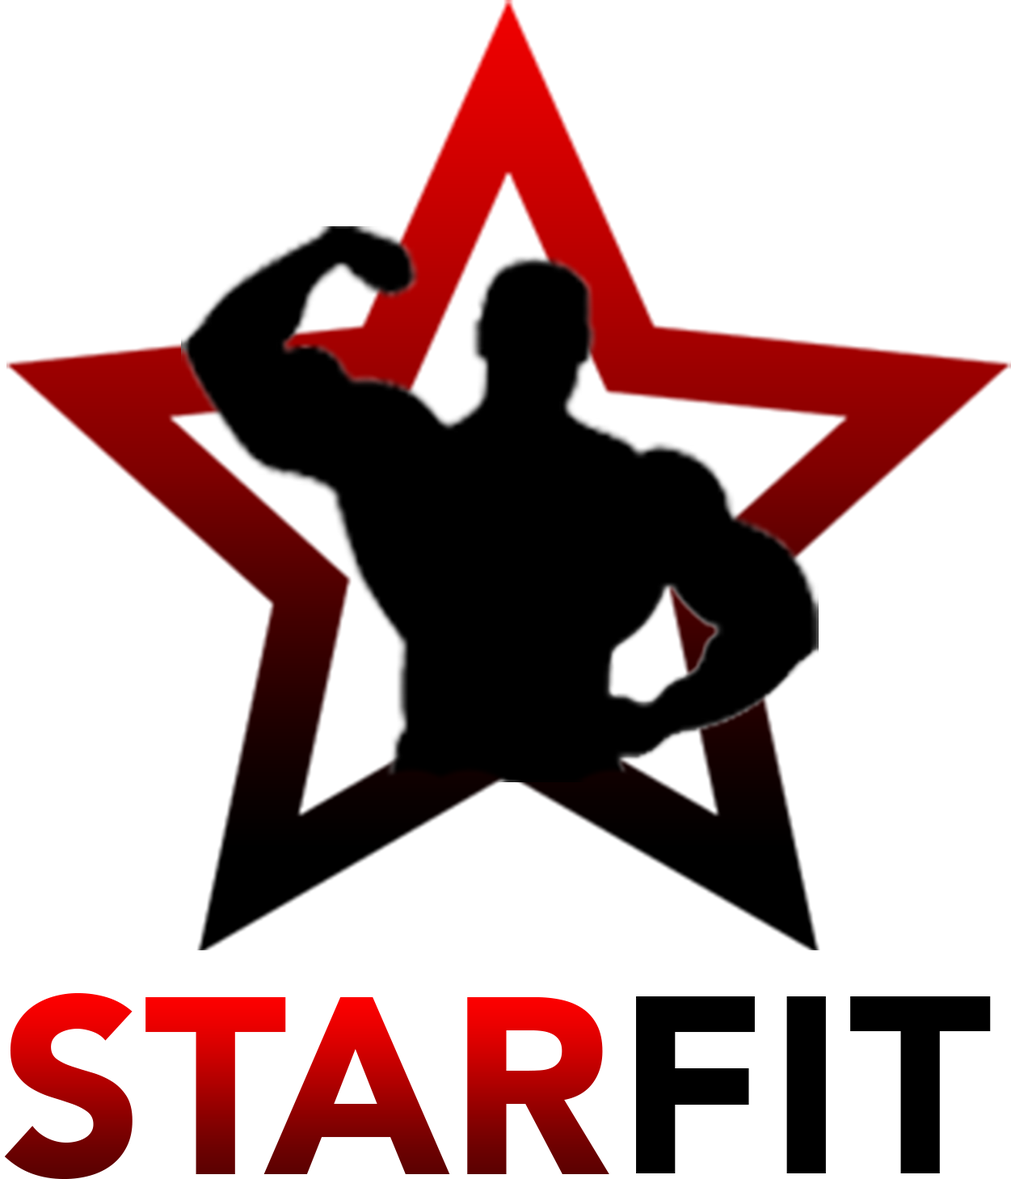
<style>
.page{position:relative;width:1011px;height:1179px;background:#ffffff}
.page>*{position:absolute;margin:0}
.t1{font:250px "Avenir-Black"}
.t2{font:250px "Avenir-Black";letter-spacing:0.02em;color:#000000}
</style>
<div class="page">
<p class="t1" style="left:4px;top:993px;width:605px;height:186px">STAR</p>
<p class="t2" style="left:636px;top:997px;width:355px;height:177px">FIT</p>
</div>
